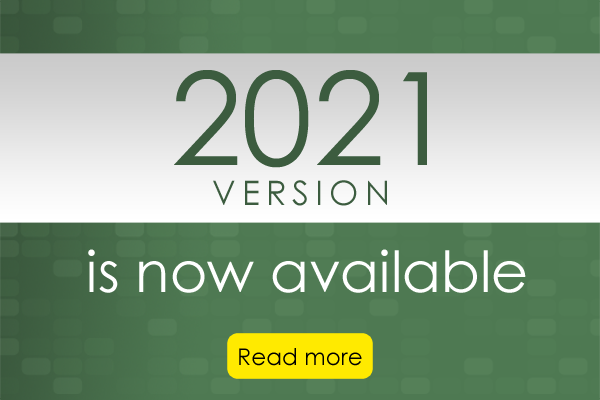
<style>
.page{position:relative;width:600px;height:400px}
.page>*{position:absolute;margin:0}
.t1{font:129.3px "CenturyGothic";color:#3c5c3f}
.t2{font:33.8px "CenturyGothic";letter-spacing:0.18em;color:#3c5c3f}
.t3{font:56.8px "CenturyGothic";color:#ffffff}
.t4{font:23px "CenturyGothic";color:#000000}
</style>
<div class="page">
<p class="t1" style="left:174px;top:70px;width:253px;height:98px">2021</p>
<p class="t2" style="left:213px;top:180px;width:174px;height:26px">VERSION</p>
<p class="t3" style="left:88px;top:249px;width:438px;height:44px">is now available</p>
<p class="t4" style="left:239px;top:348px;width:123px;height:18px">Read more</p>
</div>
